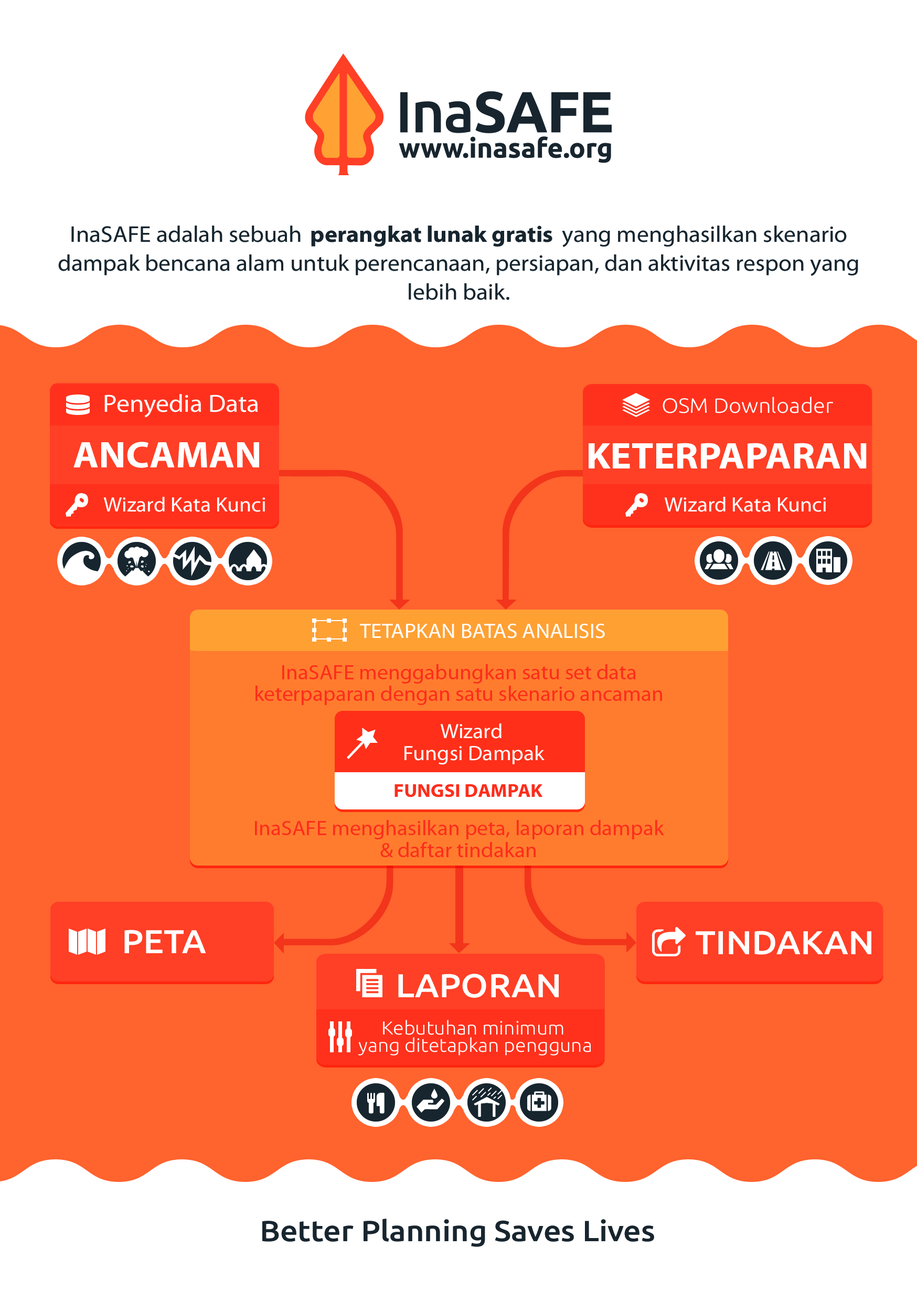
<style>
.page{position:relative;width:917px;height:1301px;background:#ff632e}
.page>*{position:absolute;margin:0}
.t1{font:24.9px "MyriadPro-Regular";color:#ffffff;scale:1.05 1}
.t2{font:20.8px "Ubuntu-Light";color:#ffffff;scale:1.05 1}
.t3{font:37.4px "MyriadPro-Bold";color:#ffffff;text-transform:uppercase;scale:1.06 1}
.t4{font:20.8px "MyriadPro-Regular";color:#ffffff;scale:1.05 1}
.t5{font:20.8px "MyriadPro-Regular";color:#ffffff;text-transform:uppercase;scale:1.05 1}
.t6{font:20.8px/21.9px "MyriadPro-Regular";color:#fc2d1c;scale:1.05 1}
.t7{font:20.8px/21.9px "MyriadPro-Regular";color:#ffffff;scale:1.05 1}
.t8{font:18.7px "MyriadPro-Bold";color:#fc2d1c;text-transform:uppercase;scale:1.05 1}
.t9{font:33.2px "Ubuntu-Medium";color:#ffffff;scale:1.05 1}
.t10{font:33.2px "Ubuntu-Medium";color:#ffffff;text-transform:uppercase;scale:1.05 1}
.t11{font:18.7px/17.5px "Ubuntu-Light";color:#ffffff;scale:1.05 1}
.t12{font:29.1px "Ubuntu-Medium";color:#18252e;scale:1.07 1}
</style>
<div class="page">
<p class="t1" style="left:104px;top:394px;width:154px;height:23px">Penyedia Data</p>
<p class="t2" style="left:662px;top:396px;width:171px;height:17px">OSM Downloader</p>
<p class="t3" style="left:73px;top:442px;width:186px;height:26px">ANCAMAN</p>
<p class="t3" style="left:588px;top:443px;width:278px;height:25px">KETERPAPARAN</p>
<p class="t4" style="left:103px;top:497px;width:162px;height:15px">Wizard Kata Kunci</p>
<p class="t4" style="left:664px;top:497px;width:162px;height:15px">Wizard Kata Kunci</p>
<p class="t5" style="left:360px;top:623px;width:245px;height:15px">TETAPKAN BATAS ANALISIS</p>
<p class="t6" style="left:255px;top:664px;width:407px;height:41px;text-align:center">InaSAFE menggabungkan satu set data keterpaparan dengan satu skenario ancaman</p>
<p class="t7" style="left:404px;top:723px;width:140px;height:42px;text-align:center">Wizard <br>Fungsi Dampak</p>
<p class="t8" style="left:394px;top:784px;width:149px;height:13px">FUNGSI DAMPAK</p>
<p class="t6" style="left:255px;top:820px;width:409px;height:37px;text-align:center">InaSAFE menghasilkan peta, laporan dampak <br>&amp; daftar tindakan</p>
<p class="t9" style="left:124px;top:929px;width:82px;height:24px">PETA</p>
<p class="t10" style="left:695px;top:930px;width:176px;height:25px">TINDAKAN</p>
<p class="t10" style="left:398px;top:973px;width:161px;height:25px">LAPORAN</p>
<p class="t11" style="left:358px;top:1020px;width:233px;height:35px;text-align:center">Kebutuhan minimum <br>yang ditetapkan pengguna</p>
<p class="t12" style="left:262px;top:1218px;width:392px;height:29px">Better Planning Saves Lives</p>
</div>
